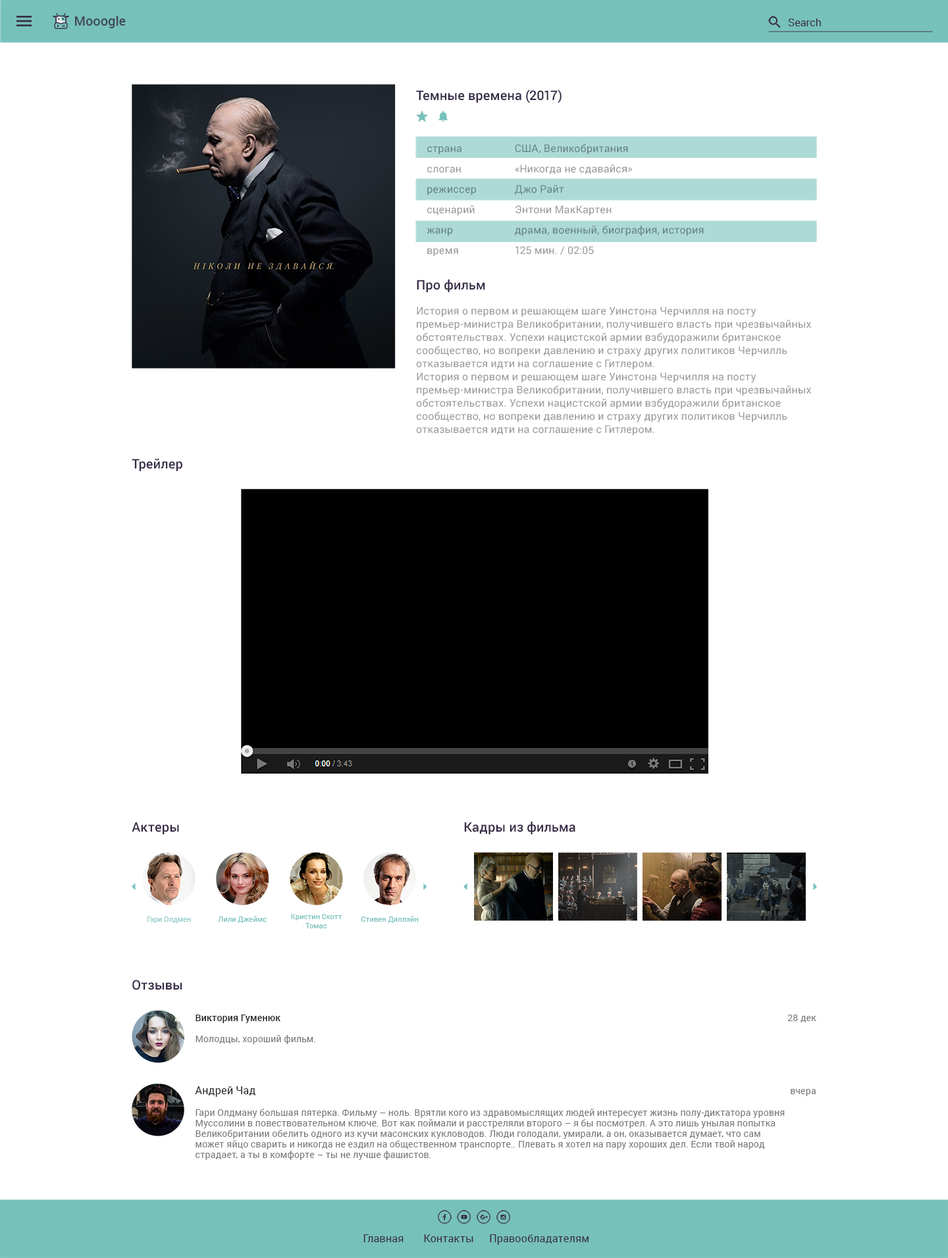
<style>
.page{position:relative;width:948px;height:1258px;background:#ffffff}
.page>*{position:absolute;margin:0}
.t1{font:13.2px "Roboto-Medium";letter-spacing:0.005em;color:#41485b}
.t2{font:10.5px "Roboto-Regular";letter-spacing:0.01em;color:#372c48}
.t3{font:13.2px "Roboto-Medium";color:#372c48}
.t4{font:10.5px/20.4px "Roboto-Regular";letter-spacing:0.01em}
.t5{font:10.5px/13.2px "Roboto-Regular";letter-spacing:0.01em;color:#9a9a9a}
.t6{font:7.2px "Roboto-Regular";letter-spacing:0.005em;color:#77c1bb}
.t7{font:7.2px/9px "Roboto-Regular";letter-spacing:0.005em;color:#77c1bb}
.t8{font:9.2px "Roboto-Medium";letter-spacing:0.01em;color:#231f20}
.t9{font:9.2px "Roboto-Regular";letter-spacing:0.01em;color:#757575}
.t10{font:10.5px "Roboto-Regular";letter-spacing:0.01em;color:#212121}
.t11{font:9.2px/10.5px "Roboto-Regular";letter-spacing:0.01em;color:#757575}
</style>
<div class="page">
<p class="t1" style="left:75px;top:16px;width:51px;height:12px">Mooogle</p>
<p class="t2" style="left:788px;top:18px;width:33px;height:8px">Search</p>
<p class="t3" style="left:416px;top:90px;width:145px;height:13px">Темные времена (2017)</p>
<p class="t4" style="left:426px;top:146px;width:50px;height:111px">страна<br>слоган <br>режиссер <br>сценарий <br>жанр <br>время</p>
<p class="t4" style="left:515px;top:143px;width:189px;height:112px">США, Великобритания<br>«Никогда не сдавайся»<br>Джо Райт<br>Энтони МакКартен<br>драма, военный, биография, история<br>125 мин. / 02:05</p>
<p class="t3" style="left:417px;top:279px;width:68px;height:13px">Про фильм</p>
<p class="t5" style="left:416px;top:307px;width:395px;height:129px">История о первом и решающем шаге Уинстона Черчилля на посту премьер-министра Великобритании, получившего власть при чрезвычайных обстоятельствах. Успехи нацистской армии взбудоражили британское сообщество, но вопреки давлению и страху других политиков Черчилль отказывается идти на соглашение с Гитлером.<br>История о первом и решающем шаге Уинстона Черчилля на посту премьер-министра Великобритании, получившего власть при чрезвычайных обстоятельствах. Успехи нацистской армии взбудоражили британское сообщество, но вопреки давлению и страху других политиков Черчилль отказывается идти на соглашение с Гитлером.</p>
<p class="t3" style="left:132px;top:459px;width:50px;height:12px">Трейлер</p>
<p class="t3" style="left:132px;top:822px;width:47px;height:12px">Актеры</p>
<p class="t3" style="left:464px;top:821px;width:111px;height:13px">Кадры из фильма</p>
<p class="t6" style="left:147px;top:917px;width:44px;height:6px;opacity:0.87">Гэри Олдмен</p>
<p class="t6" style="left:218px;top:916px;width:49px;height:7px">Лили Джеймс</p>
<p class="t7" style="left:291px;top:914px;width:51px;height:15px;text-align:center">Кристин Скотт Томас</p>
<p class="t6" style="left:361px;top:916px;width:58px;height:7px">Стивен Диллэйн</p>
<p class="t3" style="left:132px;top:980px;width:50px;height:10px">Отзывы</p>
<p class="t8" style="left:195px;top:1015px;width:85px;height:8px">Виктория Гуменюк</p>
<p class="t9" style="left:787px;top:1015px;width:29px;height:8px">28 дек</p>
<p class="t9" style="left:195px;top:1035px;width:120px;height:9px">Молодцы, хороший фильм.</p>
<p class="t10" style="left:195px;top:1087px;width:60px;height:10px">Андрей Чад</p>
<p class="t9" style="left:790px;top:1089px;width:25px;height:7px">вчера</p>
<p class="t11" style="left:195px;top:1109px;width:589px;height:51px">Гари Олдману большая пятерка. Фильму – ноль. Врятли кого из здравомыслящих людей интересует жизнь полу-диктатора уровня Муссолини в повествовательном ключе. Вот как поймали и расстреляли второго – я бы посмотрел. А это лишь унылая попытка Великобритании обелить одного из кучи масонских кукловодов. Люди голодали, умирали, а он, оказывается думает, что сам может яйцо сварить и никогда не ездил на общественном транспорте.. Плевать я хотел на пару хороших дел. Если твой народ страдает, а ты в комфорте – ты не лучше фашистов.</p>
<p class="t2" style="left:363px;top:1235px;width:40px;height:7px">Главная</p>
<p class="t2" style="left:424px;top:1235px;width:49px;height:7px">Контакты</p>
<p class="t2" style="left:490px;top:1235px;width:98px;height:10px">Правообладателям</p>
</div>
